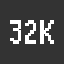
<style>
.page{position:relative;width:64px;height:64px;background:#333333}
.page>*{position:absolute;margin:0}
.t1{font:40.9px "Glasstown-NBP";letter-spacing:0.005em;color:#ffffff;font-weight:bold}
</style>
<div class="page">
<p class="t1" style="left:10px;top:20px;width:44px;height:24px">32K</p>
</div>
